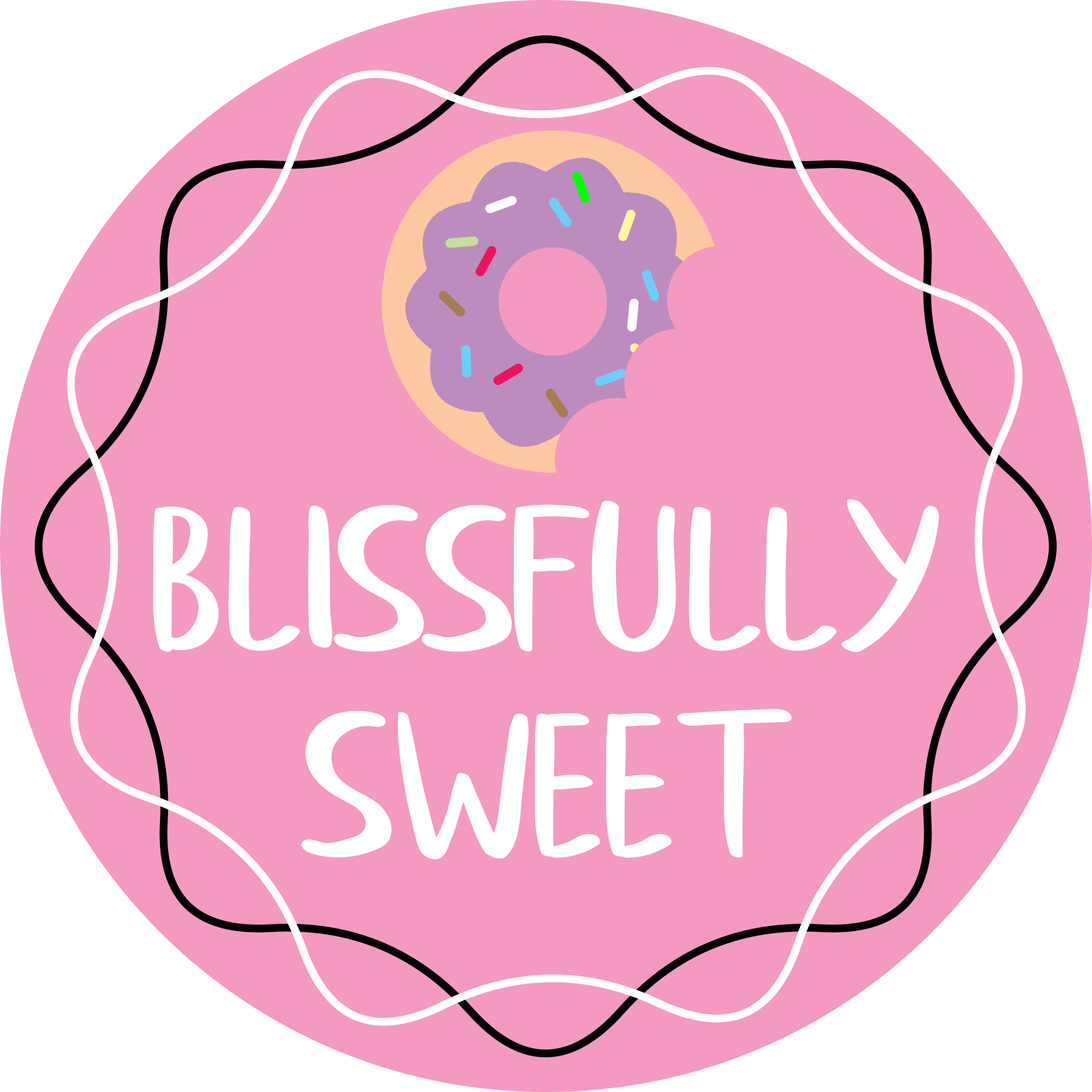
<style>
.page{position:relative;width:1092px;height:1092px;background:#f49ac1}
.page>*{position:absolute;margin:0}
.t1{font:206.6px "afanan-Regular";letter-spacing:0.01em;color:#ffffff}
</style>
<div class="page">
<p class="t1" style="left:153px;top:499px;width:787px;height:153px">Blissfully</p>
<p class="t1" style="left:301px;top:709px;width:491px;height:151px">Sweet</p>
</div>
